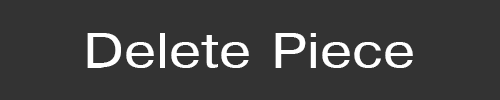
<style>
.page{position:relative;width:500px;height:100px;background:#333333}
.page>*{position:absolute;margin:0}
.t1{font:48px "Helvetica";color:#ffffff;scale:1.2 1}
</style>
<div class="page">
<p class="t1" style="left:87px;top:33px;width:326px;height:35px">Delete Piece</p>
</div>
